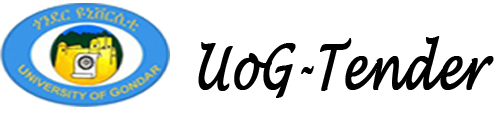
<style>
.page{position:relative;width:500px;height:130px;background:#ffffff}
.page>*{position:absolute;margin:0}
.t1{font:62.1px "LucidaHandwriting-Italic";color:#000000;font-weight:bold;font-style:italic;scale:0.68 1}
</style>
<div class="page">
<p class="t1" style="left:198px;top:36px;width:296px;height:62px">UoG-Tender</p>
</div>
